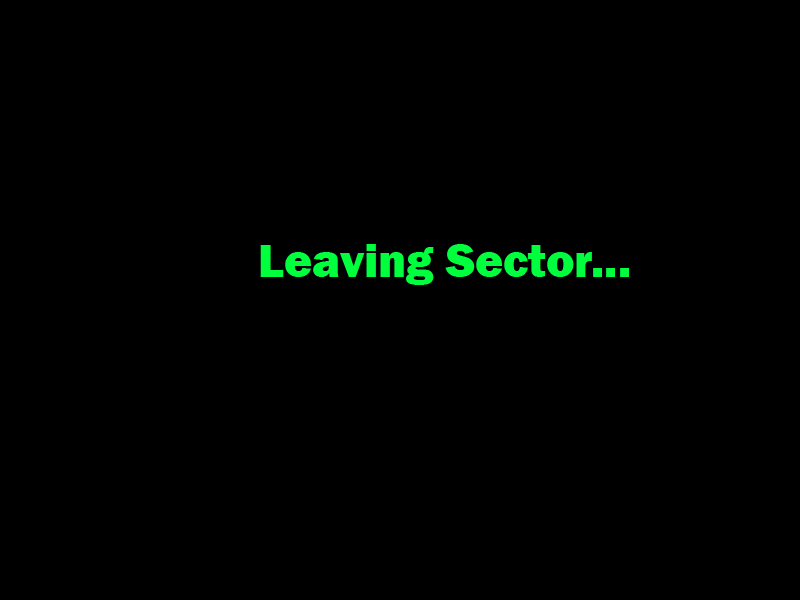
<style>
.page{position:relative;width:800px;height:600px;background:#000000}
.page>*{position:absolute;margin:0}
.t1{font:48px "FranklinGothic-Heavy";color:#00ff3c}
</style>
<div class="page">
<p class="t1" style="left:260px;top:244px;width:369px;height:41px">Leaving Sector...</p>
</div>
